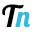
<style>
.page{position:relative;width:32px;height:32px;background:#ffffff}
.page>*{position:absolute;margin:0}
.t1{font:30px "Lobster";color:#000000}
.t2{font:30px "Lobster";color:#38b9d7}
</style>
<div class="page">
<p class="t1" style="left:2px;top:4px;width:28px;height:24px">T<span class="t2">n</span></p>
</div>
